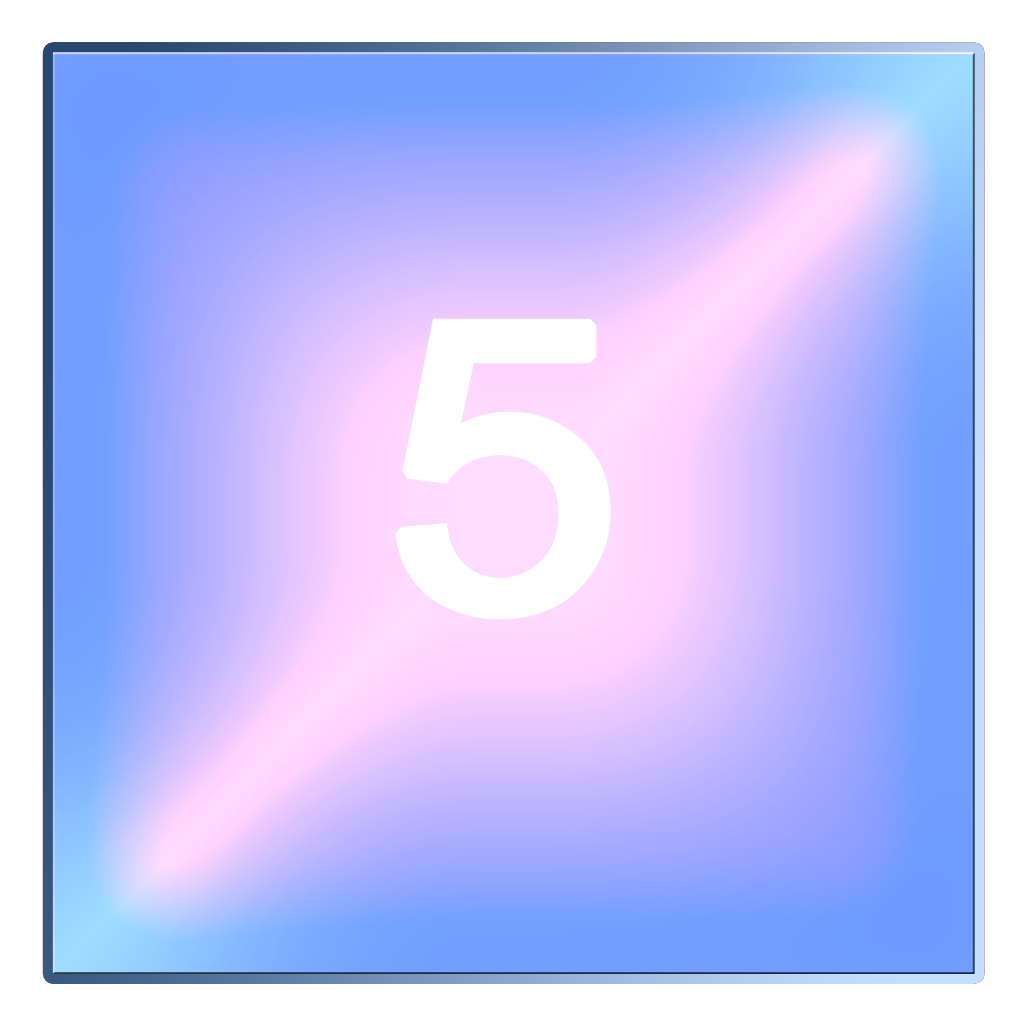
<style>
.page{position:relative;width:1024px;height:1024px}
.page>*{position:absolute;margin:0}
.t1{font:400px "ArialNarrow";color:#ffffff;font-weight:bold;scale:1.3 1}
</style>
<div class="page">
<p class="t1" style="left:395px;top:318px;width:216px;height:302px">5</p>
</div>
